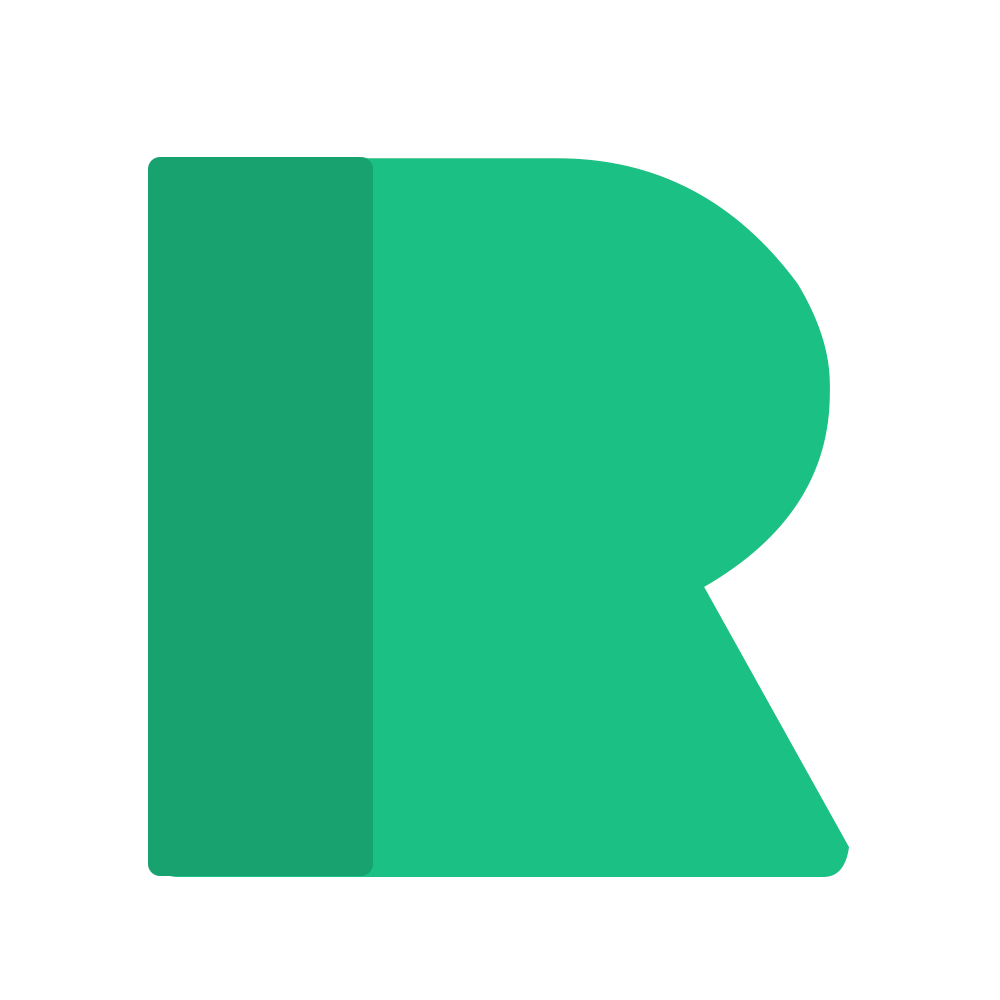
<style>
.page{position:relative;width:1000px;height:1000px;background:#ffffff}
.page>*{position:absolute;margin:0}
.t1{font:1092px "DeLarge"}
</style>
<div class="page">
<p class="t1" style="left:148px;top:158px;width:702px;height:719px">R</p>
</div>
